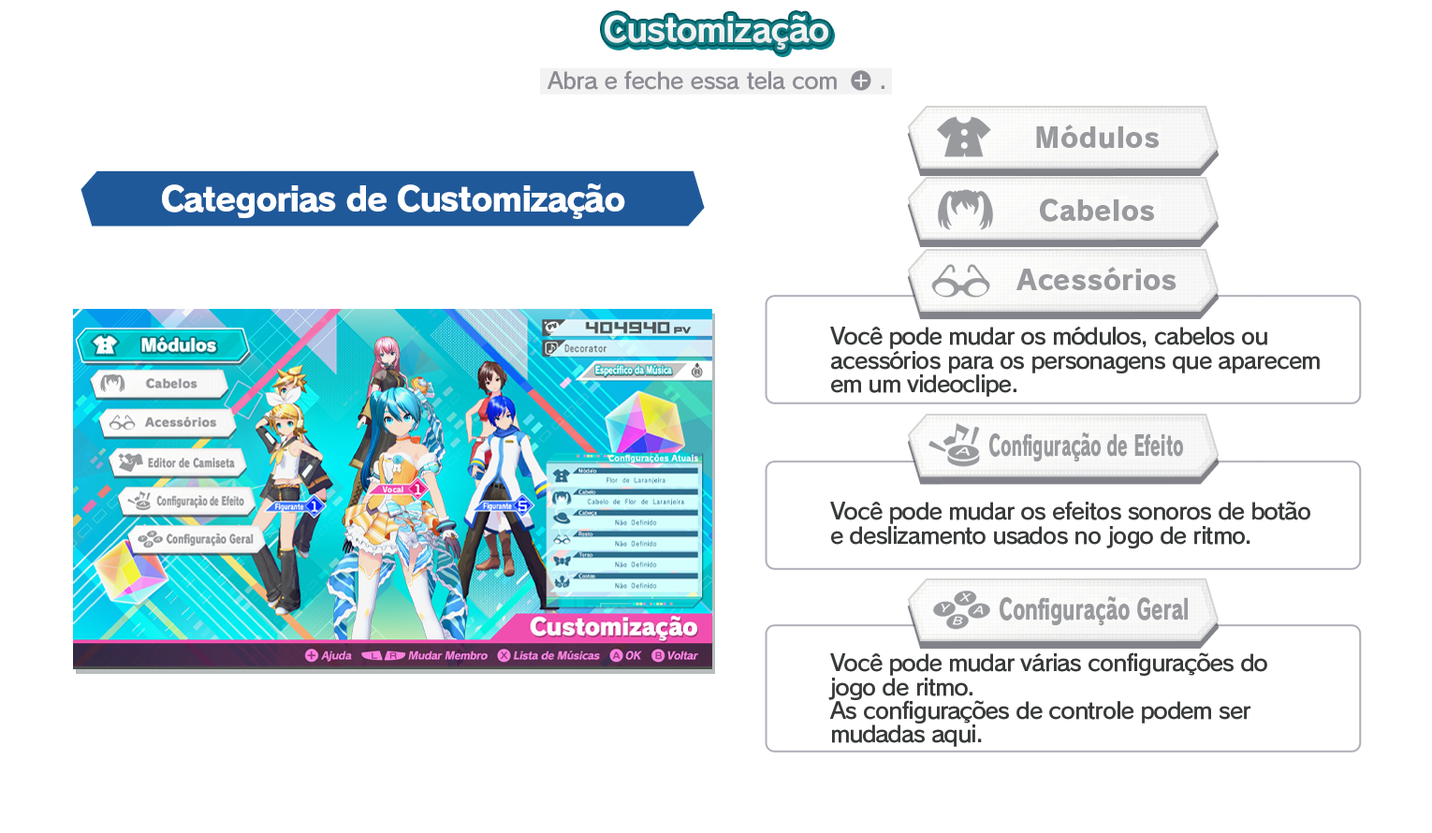
<style>
.page{position:relative;width:1432px;height:833px;background:#ffffff}
.page>*{position:absolute;margin:0}
.t1{font:33.7px "RodinPro-B";letter-spacing:-0.039em;color:#f2f3f3}
.t2{font:22.5px "RodinPro-DB";letter-spacing:-0.025em;color:#8c8b93}
.t3{font:27.4px "RodinPro-EB";letter-spacing:0.007em;color:#989a9d}
.t4{font:33.7px "RodinPro-EB";letter-spacing:-0.048em;color:#ffffff}
.t5{font:22.5px/23.7px "RodinPro-DB";letter-spacing:-0.04em;color:#383a3a}
.t6{font:27.4px "RodinPro-EB";letter-spacing:0.007em;color:#989a9d;scale:0.58 1}
.t7{font:27.4px "RodinPro-EB";letter-spacing:0.007em;color:#989a9d;scale:0.68 1}
</style>
<div class="page">
<p class="t1" style="left:605px;top:15px;width:223px;height:35px">Customização</p>
<p class="t2" style="left:547px;top:70px;width:290px;height:20px">Abra e feche essa tela com</p>
<p class="t2" style="left:881px;top:85px;width:3px;height:4px">.</p>
<p class="t3" style="left:1036px;top:124px;width:123px;height:25px">Módulos</p>
<p class="t4" style="left:162px;top:183px;width:463px;height:36px">Categorias de Customização</p>
<p class="t3" style="left:1040px;top:198px;width:114px;height:24px">Cabelos</p>
<p class="t3" style="left:1016px;top:267px;width:160px;height:23px">Acessórios</p>
<p class="t5" style="left:830px;top:326px;width:489px;height:71px">Você pode mudar os módulos, cabelos ou<br>acessórios para os personagens que aparecem<br>em um videoclipe.</p>
<p class="t6" style="left:989px;top:432px;width:194px;height:30px">Configuração de Efeito</p>
<p class="t5" style="left:830px;top:501px;width:480px;height:47px">Você pode mudar os efeitos sonoros de botão<br>e deslizamento usados no jogo de ritmo.</p>
<p class="t7" style="left:999px;top:596px;width:189px;height:30px">Configuração Geral</p>
<p class="t5" style="left:828px;top:652px;width:439px;height:95px">Você pode mudar várias configurações do<br>jogo de ritmo. <br>As configurações de controle podem ser<br>mudadas aqui.</p>
</div>
